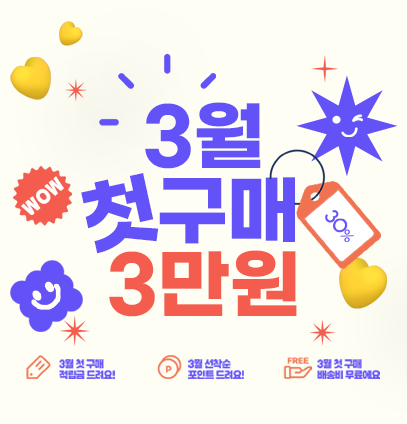
<style>
.page{position:relative;width:407px;height:424px;background:#fefef5}
.page>*{position:absolute;margin:0}
.t1{font:75.8px/73.8px "GmarketSansTTFBold";letter-spacing:-0.01em;color:#6352f8;text-transform:uppercase}
.t2{font:75.8px/73.8px "GmarketSansTTFBold";letter-spacing:-0.01em;color:#f45d4e;text-transform:uppercase}
.t3{font:80.3px "GmarketSansTTFBold";letter-spacing:-0.01em;color:#6352f8;text-transform:uppercase}
.t4{font:18.7px "GangwonEduPowerExtraBold";letter-spacing:-0.05em;color:#ffffff;text-transform:uppercase;font-weight:bold;scale:0.95 1}
.t5{font:19.1px "Raincoat-Regular";letter-spacing:-0.05em;color:#6352f8;text-transform:uppercase;font-weight:bold;scale:0.95 1}
.t6{font:14.3px "Raincoat-Regular";letter-spacing:-0.05em;color:#6352f8;text-transform:uppercase;font-weight:bold;scale:0.95 1}
.t7{font:10.8px/10.8px "GangwonEduPowerExtraBold";letter-spacing:-0.05em;color:#6352f8;text-transform:uppercase;scale:0.95 1}
</style>
<div class="page">
<p class="t1" style="left:109px;top:102px;width:188px;height:215px;text-align:center">3월<br>   구매<br><span class="t2">3만원</span></p>
<p class="t3" style="left:81px;top:173px;width:78px;height:81px;rotate:-12deg">첫</p>
<p class="t4" style="left:21px;top:176px;width:43px;height:39px;rotate:-40deg">wow</p>
<p class="t5" style="left:325px;top:210px;width:29px;height:32px;rotate:49deg">30<span class="t6">%</span></p>
<p class="t7" style="left:59px;top:359px;width:56px;height:20px">3월 첫 구매<br>적립금 드려요!</p>
<p class="t7" style="left:188px;top:359px;width:56px;height:20px">3월 선착순<br>포인트 드려요!</p>
<p class="t7" style="left:317px;top:359px;width:63px;height:20px">3월 첫 구매<br>배송비 무료에요</p>
</div>
